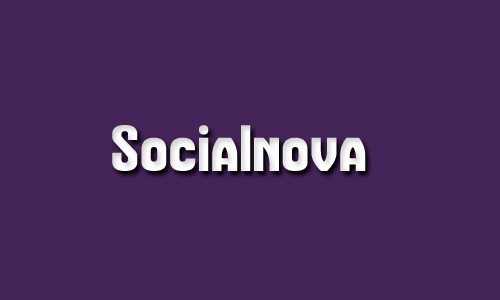
<style>
.page{position:relative;width:500px;height:300px;background:#442358}
.page>*{position:absolute;margin:0}
.t1{font:64px "DynastyMT";color:#ffffff}
</style>
<div class="page">
<p class="t1" style="left:112px;top:125px;width:254px;height:46px">Socialnova</p>
</div>
